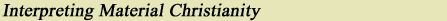
<style>
.page{position:relative;width:447px;height:21px;background:#e6e6b8}
.page>*{position:absolute;margin:0}
.t1{font:18px "TimesNewRomanPSMT";color:#010101;font-weight:bold;font-style:italic}
</style>
<div class="page">
<p class="t1" style="left:2px;top:3px;width:259px;height:18px">Interpreting Material Christianity</p>
</div>
